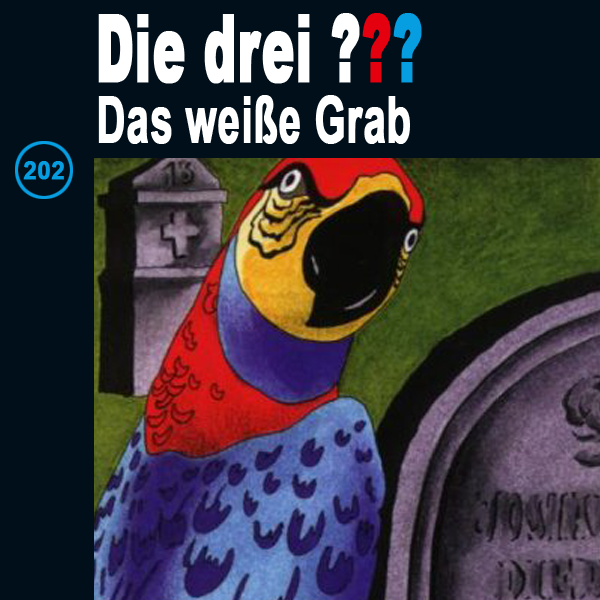
<style>
.page{position:relative;width:600px;height:600px;background:#010f1a}
.page>*{position:absolute;margin:0}
.t1{font:94px "Arial-Black";color:#ffffff;font-weight:bold;scale:0.52 1}
.t2{font:94px "Arial-Black";color:#e4000f;font-weight:bold;scale:0.52 1}
.t3{font:94px "Arial-Black";color:#069de1;font-weight:bold;scale:0.52 1}
.t4{font:63.7px "Arial-BoldMT";color:#ffffff;font-weight:bold;scale:0.63 1}
.t5{font:25.4px "Arial-BoldMT";color:#069de1;font-weight:bold;scale:0.96 1}
</style>
<div class="page">
<p class="t1" style="left:98px;top:13px;width:324px;height:71px">Die drei ?<span class="t2">?</span><span class="t3">?</span></p>
<p class="t4" style="left:98px;top:95px;width:312px;height:49px">Das weiße Grab</p>
<p class="t5" style="left:23px;top:161px;width:41px;height:19px">202</p>
</div>
